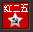
<style>
.page{position:relative;width:33px;height:32px;background:#c50000}
.page>*{position:absolute;margin:0}
.t1{font:10.4px "SimSun";letter-spacing:-0.25em;color:#ffffff}
</style>
<div class="page">
<p class="t1" style="left:4px;top:4px;width:24px;height:8px">红二五</p>
</div>
